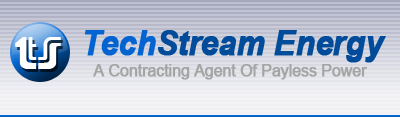
<style>
.page{position:relative;width:400px;height:117px}
.page>*{position:absolute;margin:0}
.t1{font:34px "Arial-BoldItalicMT";letter-spacing:-0.03em;color:#004b9a;font-weight:bold;scale:0.95 1}
.t2{font:34px "Arial-BoldItalicMT";letter-spacing:-0.03em;color:#0363d1;font-weight:bold;scale:0.95 1}
.t3{font:49.3px "Adriator";letter-spacing:-0.04em;color:#ffffff;scale:1.17 1}
.t4{font:17px "ArialMT";letter-spacing:-0.03em;color:#a4a4a4;font-weight:bold;scale:0.94 1}
</style>
<div class="page">
<p class="t1" style="left:84px;top:30px;width:302px;height:33px"><span class="t2">Tech</span>Stream Energy</p>
<p class="t3" style="left:15px;top:37px;width:46px;height:32px">TS</p>
<p class="t4" style="left:93px;top:64px;width:275px;height:16px">A Contracting Agent Of Payless Power</p>
</div>
